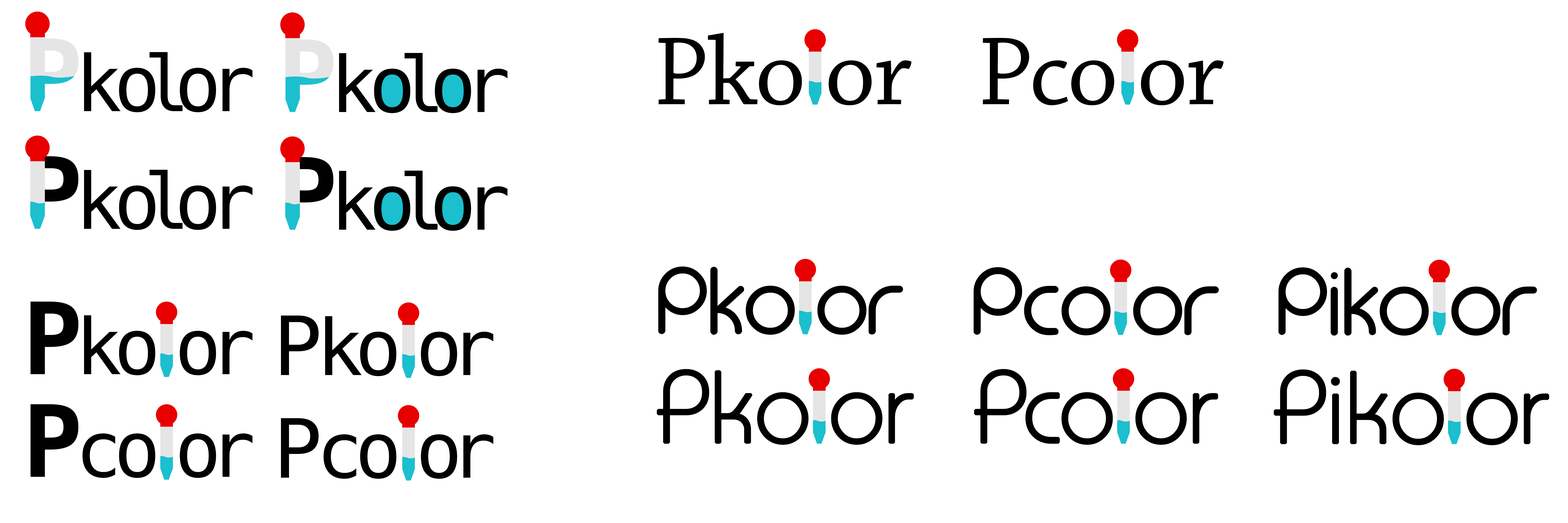
<style>
.page{position:relative;width:1568px;height:523px;background:#ffffff}
.page>*{position:absolute;margin:0}
.t1{font:77.3px "Menlo-Regular";letter-spacing:-0.16em;color:#000000}
.t2{font:99.5px "Menlo-Bold";letter-spacing:-0.075em;color:#e5e5e5}
.t3{font:77.3px "Menlo-Regular";letter-spacing:-0.1em;color:#000000}
.t4{font:77.3px "Menlo-Regular";letter-spacing:-0.26em;color:#000000}
.t5{font:101.5px "ChaparralPro-Regular";letter-spacing:-0.02em;color:#000000}
.t6{font:101.5px "ChaparralPro-Regular";letter-spacing:-0.04em;color:#000000}
.t7{font:99.5px "Menlo-Bold";letter-spacing:-0.075em;color:#000000}
.t8{font:95.9px "Monoglyceride";letter-spacing:-0.02em;color:#000000}
.t9{font:95px "Monoglyceride";color:#000000}
.t10{font:95.9px "Monoglyceride";color:#000000}
.t11{font:81.7px "Menlo-Regular";letter-spacing:-0.075em;color:#000000}
.t12{font:101.5px "MonaKo";letter-spacing:-0.04em;color:#000000;font-weight:bold}
.t13{font:101.5px "MonaKo";letter-spacing:-0.02em;color:#000000;font-weight:bold}
.t14{font:101.5px "MonaKo";letter-spacing:0.02em;color:#000000;font-weight:bold}
.t15{font:101.5px "MonaKo";color:#000000;font-weight:bold}
</style>
<div class="page">
<p class="t1" style="left:30px;top:39px;width:223px;height:73px"><span class="t2">P</span><span class="t3">k</span><span class="t4">o</span>lor</p>
<p class="t1" style="left:286px;top:39px;width:222px;height:74px"><span class="t2">P</span><span class="t3">k</span><span class="t4">o</span>lor</p>
<p class="t5" style="left:659px;top:33px;width:253px;height:72px">Pko or</p>
<p class="t5" style="left:983px;top:38px;width:241px;height:67px"><span class="t6">P</span>co or</p>
<p class="t1" style="left:30px;top:156px;width:223px;height:74px"><span class="t7">P</span><span class="t3">k</span><span class="t4">o</span>lor</p>
<p class="t1" style="left:286px;top:157px;width:222px;height:74px"><span class="t7">P</span><span class="t3">k</span><span class="t4">o</span>lor</p>
<p class="t8" style="left:658px;top:266px;width:245px;height:69px"><span class="t9">p</span>ko or</p>
<p class="t8" style="left:973px;top:267px;width:246px;height:68px"><span class="t9">p</span>co or</p>
<p class="t8" style="left:1278px;top:267px;width:259px;height:68px"><span class="t9">p</span><span class="t10">i</span>ko or</p>
<p class="t1" style="left:30px;top:301px;width:223px;height:74px"><span class="t7">P</span><span class="t3">k</span><span class="t4">o</span> or</p>
<p class="t1" style="left:281px;top:315px;width:212px;height:61px"><span class="t11">P</span><span class="t3">k</span><span class="t4">o</span> or</p>
<p class="t12" style="left:657px;top:369px;width:257px;height:75px"><span class="t13">P</span>ko or</p>
<p class="t12" style="left:974px;top:369px;width:244px;height:75px"><span class="t13">P</span><span class="t14">c</span>o or</p>
<p class="t12" style="left:1274px;top:369px;width:275px;height:76px"><span class="t13">P</span><span class="t15">i</span>ko or</p>
<p class="t1" style="left:30px;top:404px;width:223px;height:74px"><span class="t7">P</span><span class="t3">c</span><span class="t4">o</span> or</p>
<p class="t1" style="left:281px;top:418px;width:212px;height:60px"><span class="t11">P</span><span class="t3">c</span><span class="t4">o</span> or</p>
</div>
